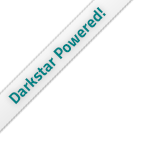
<style>
.page{position:relative;width:149px;height:149px;background:#ffffff}
.page>*{position:absolute;margin:0}
.t1{font:16px "TitilliumWeb-Bold";color:#008285}
</style>
<div class="page">
<p class="t1" style="left:8px;top:7px;width:98px;height:98px;rotate:-45deg">Darkstar Powered!</p>
</div>
